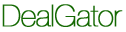
<style>
.page{position:relative;width:126px;height:32px;background:#ffffff}
.page>*{position:absolute;margin:0}
.t1{font:30px "HelveticaNeue-UltraLight";letter-spacing:-0.025em;color:#156903;font-weight:bold}
</style>
<div class="page">
<p class="t1" style="left:2px;top:4px;width:121px;height:23px">DealGator</p>
</div>
